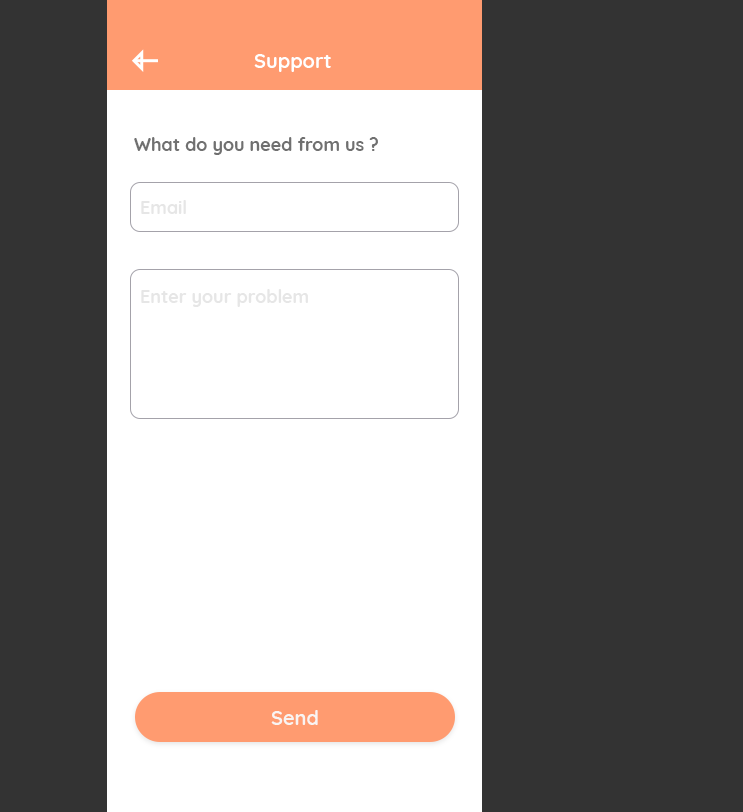
<style>
.page{position:relative;width:743px;height:812px;background:#333333}
.page>*{position:absolute;margin:0}
.t1{font:20px "Quicksand-Bold";color:#ffffff}
.t2{font:18px "Quicksand-Bold";color:#707070}
.t3{font:18px "Quicksand-Bold";color:#e6e6e6}
.t4{font:20px "Quicksand-Bold";color:#f9f4f2}
</style>
<div class="page">
<p class="t1" style="left:254px;top:54px;width:77px;height:18px">Support</p>
<p class="t2" style="left:134px;top:137px;width:244px;height:18px">What do you need from us ?</p>
<p class="t3" style="left:141px;top:200px;width:45px;height:14px">Email</p>
<p class="t3" style="left:141px;top:289px;width:167px;height:18px">Enter your problem</p>
<p class="t4" style="left:271px;top:710px;width:47px;height:15px">Send</p>
</div>
